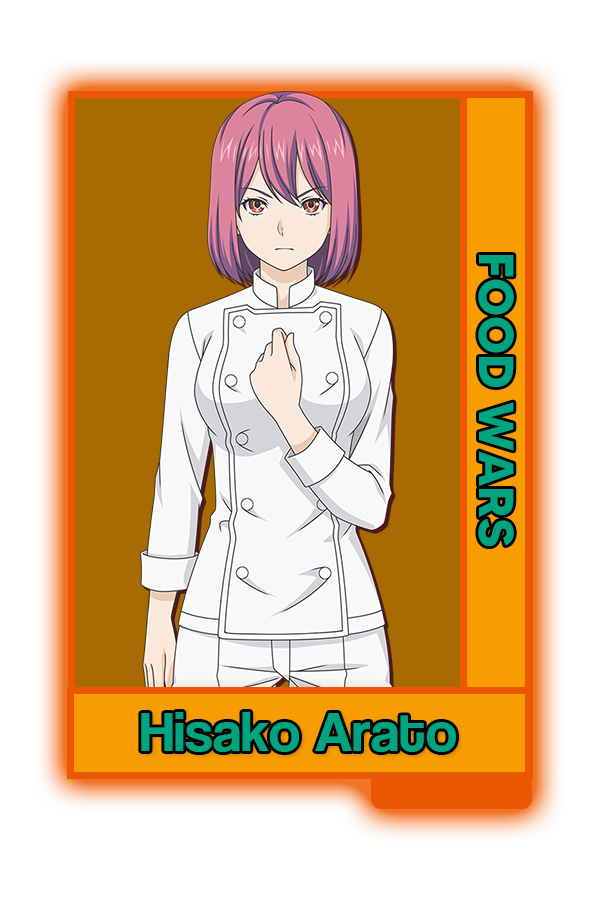
<style>
.page{position:relative;width:600px;height:900px;background:#ffffff}
.page>*{position:absolute;margin:0}
.t1{font:48.8px "MADETOMMY-Bold";color:#009f7b}
.t2{font:58.3px "CoolveticaRg-Regular";color:#009f7b}
</style>
<div class="page">
<p class="t1" style="left:478px;top:255px;width:36px;height:291px;rotate:90deg">FOOD WARS</p>
<p class="t2" style="left:141px;top:712px;width:315px;height:40px">Hisako Arato</p>
</div>
